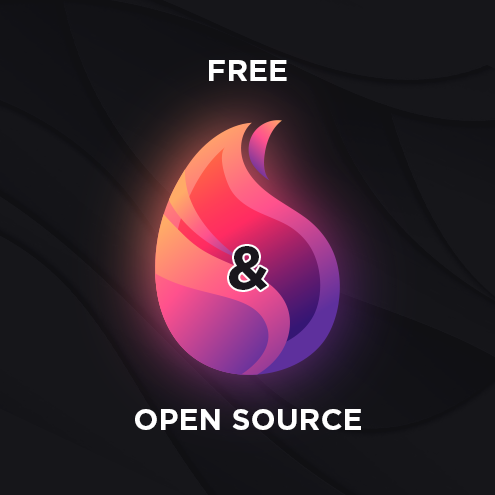
<style>
.page{position:relative;width:495px;height:495px;background:#16161a}
.page>*{position:absolute;margin:0}
.t1{font:30px "Gotham-Bold";color:#ffffff;font-variant:small-caps}
.t2{font:60px "Gotham-Bold";color:#19161d;font-variant:small-caps}
</style>
<div class="page">
<p class="t1" style="left:209px;top:60px;width:78px;height:21px">FREE</p>
<p class="t2" style="left:229px;top:246px;width:39px;height:45px">&amp;</p>
<p class="t1" style="left:135px;top:409px;width:226px;height:21px">OPEN SOURCE</p>
</div>
